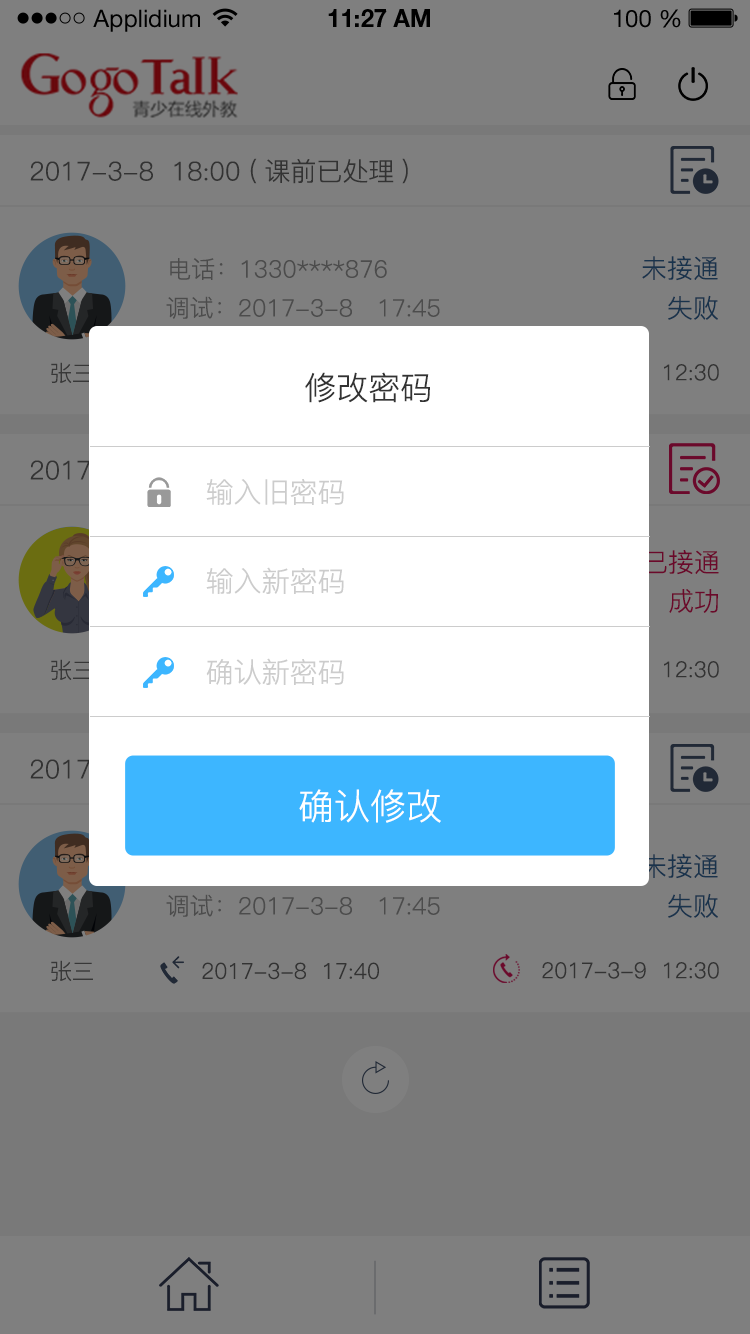
<style>
.page{position:relative;width:750px;height:1334px;background:#7f7f7f}
.page>*{position:absolute;margin:0}
.t1{font:24px "HelveticaNeueLTStd-Roman";color:#000000}
.t2{font:24px "HelveticaNeueLTStd-Bd";color:#000000}
.t3{font:26px "PingFang-SC-Regular";color:#333333}
.t4{font:26px "PingFang-SC-Regular";color:#19334c}
.t5{font:24px "PingFang-SC-Regular";color:#4c4c4c}
.t6{font:22px "PingFang-SC-Regular";color:#383838}
.t7{font:32px "PingFang-SC-Regular";color:#333333}
.t8{font:28px "PingFang-SC-Regular";color:#cccccc}
.t9{font:26px "PingFang-SC-Regular";color:#6b092b}
.t10{font:36px "PingFang-SC-Regular";color:#ffffff}
.t11{font:22px "PingFang-SC-Regular";color:#333333}
</style>
<div class="page">
<p class="t1" style="left:93px;top:9px;width:107px;height:23px">Applidium</p>
<p class="t2" style="left:328px;top:9px;width:102px;height:18px">11:27 AM</p>
<p class="t1" style="left:614px;top:9px;width:67px;height:19px">100 %</p>
<p class="t3" style="left:30px;top:158px;width:378px;height:26px">2017-3-8  18:00 (课前已处理)</p>
<p class="t4" style="left:642px;top:256px;width:76px;height:25px">未接通</p>
<p class="t5" style="left:170px;top:258px;width:217px;height:22px">电话：1330****876</p>
<p class="t5" style="left:166px;top:296px;width:274px;height:23px">调试：2017-3-8   17:45</p>
<p class="t4" style="left:668px;top:295px;width:50px;height:25px">失败</p>
<p class="t6" style="left:51px;top:362px;width:42px;height:21px">张三</p>
<p class="t7" style="left:305px;top:372px;width:125px;height:31px">修改密码</p>
<p class="t8" style="left:206px;top:479px;width:138px;height:26px">输入旧密码</p>
<p class="t9" style="left:644px;top:550px;width:75px;height:25px">已接通</p>
<p class="t8" style="left:206px;top:567px;width:138px;height:27px">输入新密码</p>
<p class="t9" style="left:669px;top:589px;width:49px;height:24px">成功</p>
<p class="t6" style="left:51px;top:659px;width:42px;height:21px">张三</p>
<p class="t8" style="left:206px;top:658px;width:138px;height:27px">确认新密码</p>
<p class="t10" style="left:299px;top:789px;width:142px;height:34px">确认修改</p>
<p class="t4" style="left:642px;top:854px;width:76px;height:25px">未接通</p>
<p class="t5" style="left:166px;top:894px;width:274px;height:23px">调试：2017-3-8   17:45</p>
<p class="t4" style="left:668px;top:893px;width:50px;height:25px">失败</p>
<p class="t6" style="left:51px;top:960px;width:42px;height:21px">张三</p>
<p class="t11" style="left:202px;top:962px;width:177px;height:18px">2017-3-8  17:40</p>
<p class="t11" style="left:542px;top:962px;width:177px;height:17px">2017-3-9  12:30</p>
</div>
